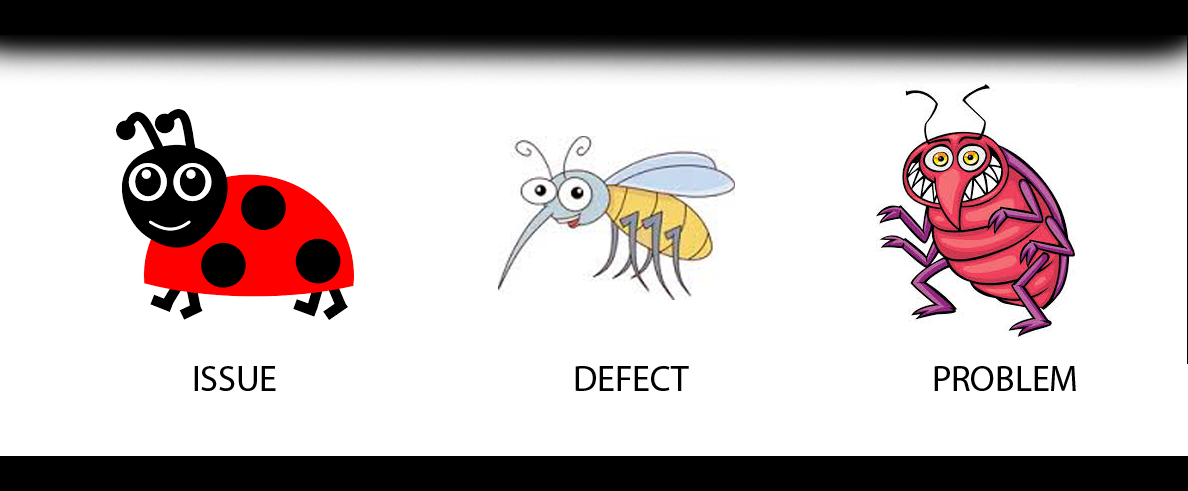
<style>
.page{position:relative;width:1188px;height:491px;background:#ffffff}
.page>*{position:absolute;margin:0}
.t1{font:36px "MyriadPro-Regular";color:#000000}
</style>
<div class="page">
<p class="t1" style="left:194px;top:366px;width:82px;height:25px">ISSUE</p>
<p class="t1" style="left:575px;top:366px;width:114px;height:25px">DEFECT</p>
<p class="t1" style="left:934px;top:366px;width:142px;height:25px">PROBLEM</p>
</div>
